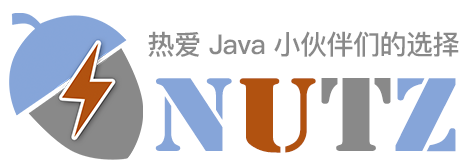
<style>
.page{position:relative;width:475px;height:167px;background:#ffffff}
.page>*{position:absolute;margin:0}
.t1{font:27.2px "PingFangSC-Medium";letter-spacing:-0.025em;color:#898989}
.t2{font:97.2px "StencilStd";color:#86a5d9;scale:1.14 1}
.t3{font:97.2px "StencilStd";color:#b15210;scale:1.14 1}
.t4{font:97.2px "StencilStd";color:#898989;scale:1.14 1}
</style>
<div class="page">
<p class="t1" style="left:148px;top:31px;width:311px;height:26px">热爱 Java 小伙伴们的选择</p>
<p class="t2" style="left:155px;top:78px;width:301px;height:75px">N<span class="t3">u</span><span class="t4">t</span>z</p>
</div>
